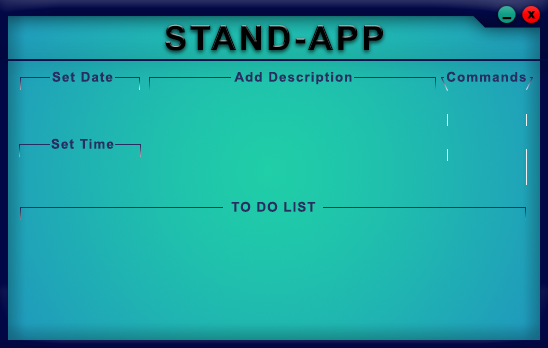
<style>
.page{position:relative;width:548px;height:348px}
.page>*{position:absolute;margin:0}
.t1{font:22.1px "Arial-BoldMT";letter-spacing:0.08em;color:#000000;scale:0.67 1}
.t2{font:14.3px "Arial-BoldMT";letter-spacing:0.08em;color:#000000}
.t3{font:34.4px "Arial-BoldMT";letter-spacing:0.08em;color:#000000}
.t4{font:13.3px "Arial-BoldMT";letter-spacing:0.08em;color:#282d62}
</style>
<div class="page">
<p class="t1" style="left:502px;top:17px;width:10px;height:3px">_</p>
<p class="t2" style="left:527px;top:11px;width:9px;height:8px">x</p>
<p class="t3" style="left:165px;top:24px;width:218px;height:27px">STAND-APP</p>
<p class="t4" style="left:52px;top:71px;width:61px;height:11px">Set Date</p>
<p class="t4" style="left:234px;top:72px;width:118px;height:13px">Add Description</p>
<p class="t4" style="left:446px;top:71px;width:80px;height:11px">Commands</p>
<p class="t4" style="left:51px;top:138px;width:63px;height:11px">Set Time</p>
<p class="t4" style="left:231px;top:201px;width:85px;height:11px">TO DO LIST</p>
</div>
